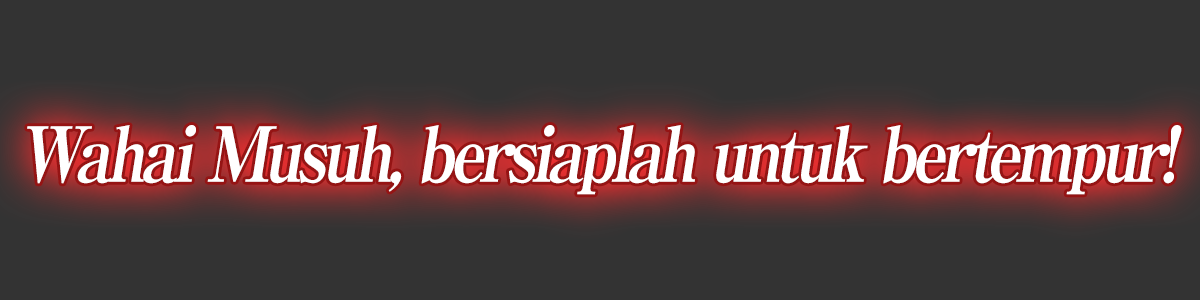
<style>
.page{position:relative;width:1200px;height:300px;background:#333333}
.page>*{position:absolute;margin:0}
.t1{font:76px "RyuminPro-ExBold";letter-spacing:-0.08em;color:#ffffff;font-style:italic;scale:0.9 1}
</style>
<div class="page">
<p class="t1" style="left:27px;top:125px;width:1155px;height:70px">Wahai Musuh, bersiaplah untuk bertempur!</p>
</div>
